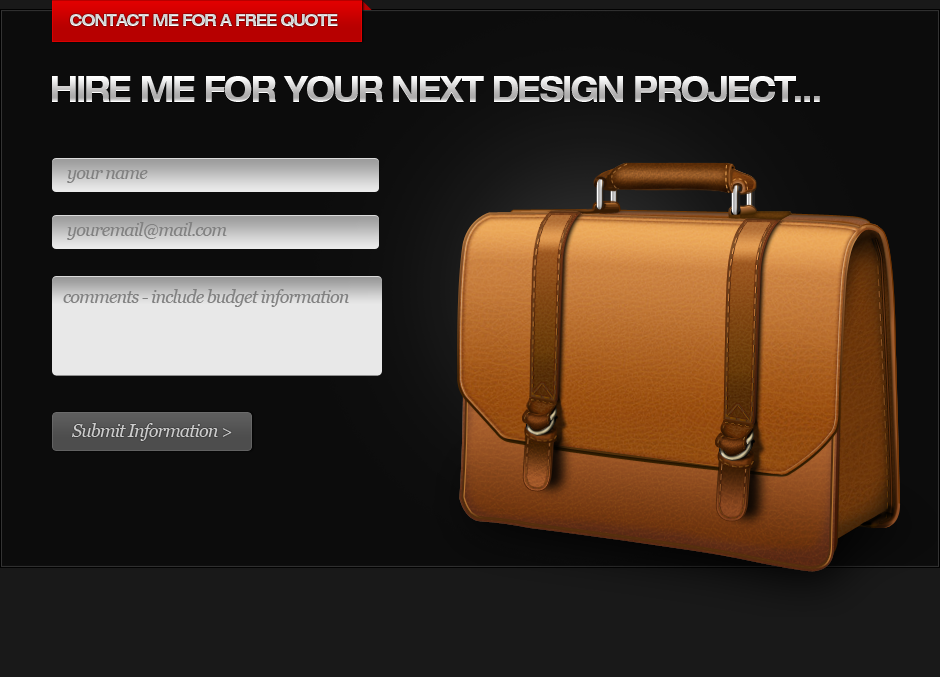
<style>
.page{position:relative;width:940px;height:677px;background:#0c0c0c}
.page>*{position:absolute;margin:0}
.t1{font:16.8px "HelveticaNeueLTStd-BdEx";letter-spacing:-0.05em;color:#d6d6d6;text-transform:uppercase;scale:0.83 1}
.t2{font:36px "HelveticaNeueLTStd-BdEx";letter-spacing:-0.05em;text-transform:uppercase;scale:0.83 1}
.t3{font:18px "Georgia-Italic";letter-spacing:-0.05em;color:#818181}
.t4{font:18px "Georgia-Italic";letter-spacing:-0.05em;color:#cccccc}
</style>
<div class="page">
<p class="t1" style="left:70px;top:14px;width:268px;height:14px">contact me for a free quote</p>
<p class="t2" style="left:52px;top:76px;width:768px;height:26px">hire me for your next design project...</p>
<p class="t3" style="left:67px;top:170px;width:81px;height:13px">your name</p>
<p class="t3" style="left:67px;top:222px;width:160px;height:18px">youremail@mail.com</p>
<p class="t3" style="left:63px;top:289px;width:286px;height:18px">comments - include budget information</p>
<p class="t4" style="left:72px;top:423px;width:160px;height:18px">Submit Information &gt;</p>
</div>
